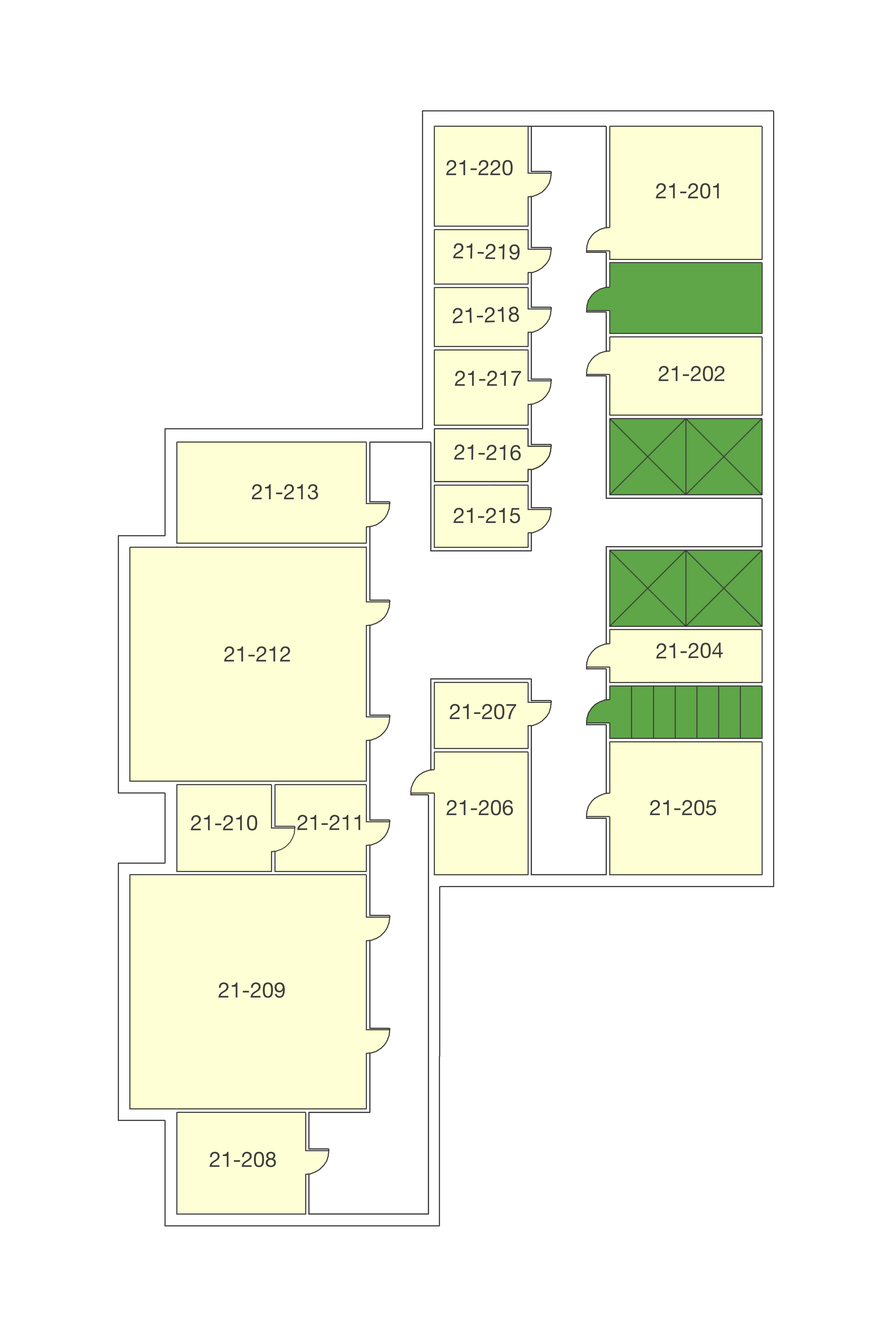
<style>
.page{position:relative;width:892px;height:1337px;background:#ffffff}
.page>*{position:absolute;margin:0}
.t1{font:21.3px "HelveticaNeue";color:#3f3f3f}
.t2{font:21.4px "HelveticaNeue";color:#3f3f3f}
</style>
<div class="page">
<p class="t1" style="left:446px;top:160px;width:66px;height:16px">21-220</p>
<p class="t1" style="left:655px;top:183px;width:64px;height:16px">21-201</p>
<p class="t2" style="left:453px;top:243px;width:67px;height:17px;rotate:1deg">21-219</p>
<p class="t2" style="left:452px;top:307px;width:67px;height:16px;rotate:-1deg">21-218</p>
<p class="t1" style="left:658px;top:366px;width:66px;height:16px">21-202</p>
<p class="t1" style="left:454px;top:371px;width:67px;height:15px">21-217</p>
<p class="t2" style="left:454px;top:444px;width:67px;height:17px;rotate:1deg">21-216</p>
<p class="t1" style="left:251px;top:484px;width:67px;height:16px">21-213</p>
<p class="t2" style="left:453px;top:508px;width:67px;height:15px">21-215</p>
<p class="t1" style="left:224px;top:646px;width:66px;height:16px">21-212</p>
<p class="t2" style="left:656px;top:643px;width:66px;height:16px;rotate:-1deg">21-204</p>
<p class="t2" style="left:449px;top:704px;width:67px;height:16px">21-207</p>
<p class="t1" style="left:446px;top:800px;width:67px;height:16px">21-206</p>
<p class="t1" style="left:649px;top:800px;width:67px;height:16px">21-205</p>
<p class="t1" style="left:191px;top:815px;width:66px;height:16px">21-210</p>
<p class="t1" style="left:297px;top:815px;width:63px;height:15px">21-211</p>
<p class="t1" style="left:218px;top:983px;width:67px;height:15px">21-209</p>
<p class="t1" style="left:209px;top:1152px;width:67px;height:16px">21-208</p>
</div>
